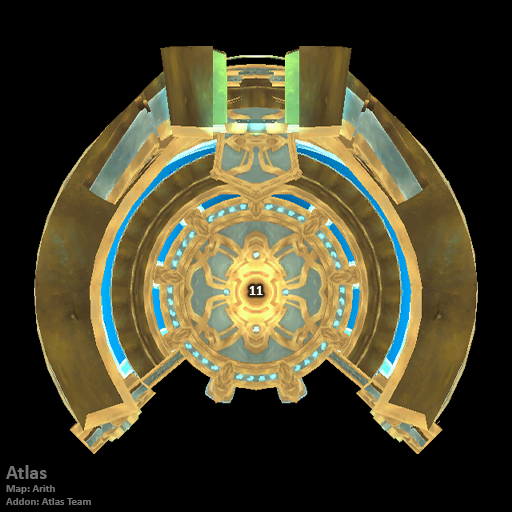
<style>
.page{position:relative;width:512px;height:512px;background:#000000}
.page>*{position:absolute;margin:0}
.t1{font:14px "Calibri-Bold";color:#ffffff}
.t2{font:11px "Calibri-Bold";color:#747474}
.t3{font:20px "Calibri-Bold";color:#747474}
</style>
<div class="page">
<p class="t1" style="left:249px;top:286px;width:14px;height:9px">11</p>
<p class="t2" style="left:6px;top:465px;width:85px;height:40px"><span class="t3">Atlas<br></span>Map: Arith<br>Addon: Atlas Team</p>
</div>
